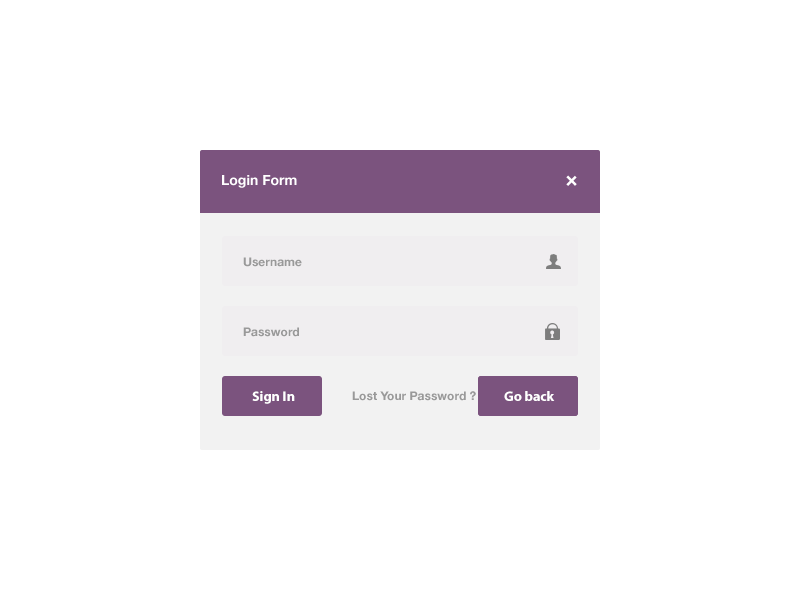
<style>
.page{position:relative;width:800px;height:600px;background:#ffffff}
.page>*{position:absolute;margin:0}
.t1{font:14px "HelveticaNeue-Bold";color:#ffffff}
.t2{font:24px "HelveticaNeue-Bold";color:#ffffff}
.t3{font:12px "HelveticaNeue-Bold";color:#999999}
.t4{font:14px "MyriadPro-Bold";color:#ffffff}
</style>
<div class="page">
<p class="t1" style="left:222px;top:175px;width:75px;height:13px">Login Form</p>
<p class="t2" style="left:566px;top:175px;width:11px;height:11px;rotate:45deg">+</p>
<p class="t3" style="left:243px;top:257px;width:59px;height:10px">Username</p>
<p class="t3" style="left:243px;top:327px;width:56px;height:10px">Password</p>
<p class="t4" style="left:252px;top:391px;width:43px;height:13px">Sign In</p>
<p class="t3" style="left:352px;top:391px;width:124px;height:10px">Lost Your Password ?</p>
<p class="t4" style="left:504px;top:391px;width:51px;height:10px">Go back</p>
</div>
